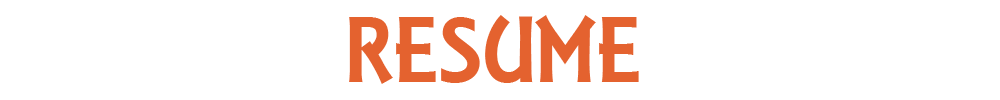
<style>
.page{position:relative;width:1000px;height:100px;background:#ffffff}
.page>*{position:absolute;margin:0}
.t1{font:100px "ARESSENCE";color:#e4622f}
</style>
<div class="page">
<p class="t1" style="left:349px;top:15px;width:290px;height:69px">RESUME</p>
</div>
